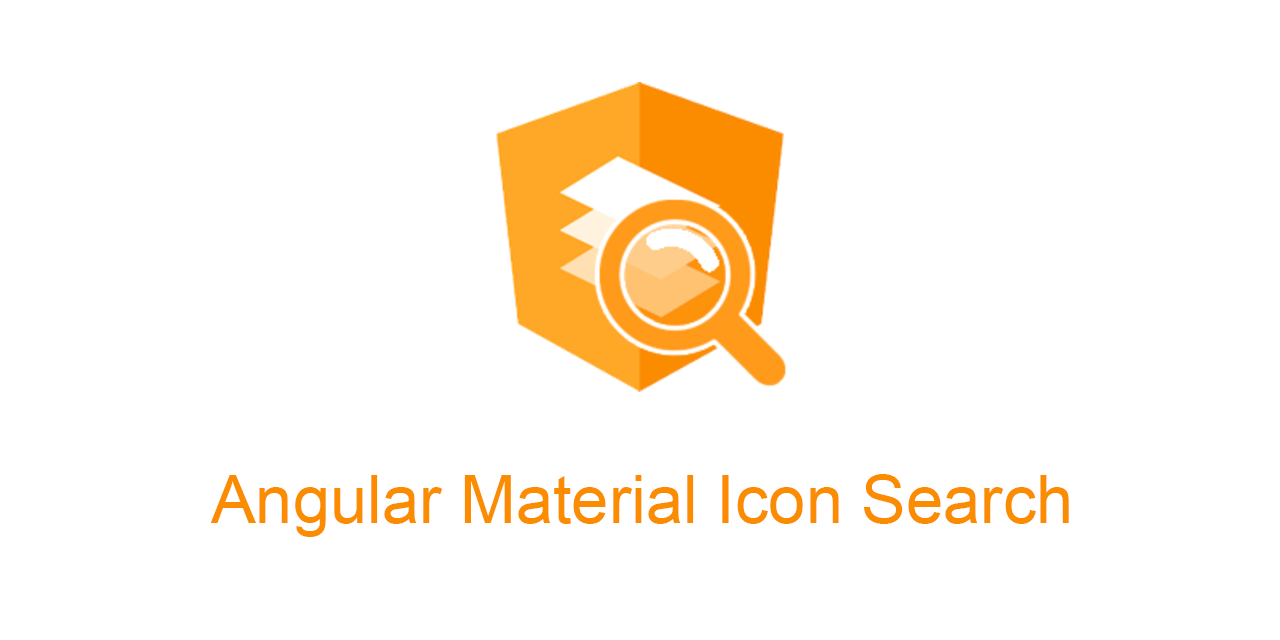
<style>
.page{position:relative;width:1280px;height:640px;background:#ffffff}
.page>*{position:absolute;margin:0}
.t1{font:66.9px "ArialMT";color:#fb8c00}
</style>
<div class="page">
<p class="t1" style="left:210px;top:474px;width:859px;height:63px">Angular Material Icon Search</p>
</div>
